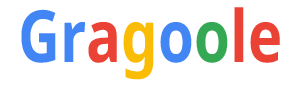
<style>
.page{position:relative;width:300px;height:90px;background:#ffffff}
.page>*{position:absolute;margin:0}
.t1{font:72.1px "NotoSans-Bold";color:#4285f4;scale:0.81 1}
.t2{font:72.1px "NotoSans-Bold";color:#ea4335;scale:0.81 1}
.t3{font:72.1px "NotoSans-Bold";color:#fbbc05;scale:0.81 1}
.t4{font:72.1px "NotoSans-Bold";color:#34a853;scale:0.81 1}
</style>
<div class="page">
<p class="t1" style="left:21px;top:7px;width:259px;height:73px">Gr<span class="t2">a</span><span class="t3">g</span>o<span class="t4">o</span><span class="t2">le</span></p>
</div>
